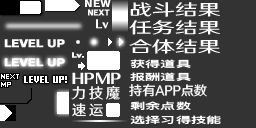
<style>
.page{position:relative;width:256px;height:128px;background:#333333}
.page>*{position:absolute;margin:0}
.t1{font:16px/18px "HYWenHei-FEW";letter-spacing:-0.015em;color:#ffffff;scale:1.45 1}
.t2{font:16px/18.7px "HYWenHei-FEW";letter-spacing:-0.015em;color:#ffffff;scale:1.45 1}
.t3{font:8.9px/12.7px "DFKingGothicSC14-Semibold";letter-spacing:0.005em;color:#ffffff;scale:1.71 1}
.t4{font:14.7px/16.7px "HYWenHei-FEW";letter-spacing:0.165em;color:#ffffff}
.t5{font:13.3px "HYWenHei-FEW";letter-spacing:-0.015em;color:#ffffff}
.t6{font:8.9px/13.3px "DFKingGothicSC14-Semibold";letter-spacing:0.005em;color:#ffffff;scale:1.71 1}
</style>
<div class="page">
<p class="t1" style="left:129px;top:2px;width:91px;height:52px">战斗结果<br><span class="t2">任务结果<br></span>合体结果</p>
<p class="t3" style="left:130px;top:59px;width:61px;height:22px">获得道具<br>报酬道具</p>
<p class="t4" style="left:72px;top:85px;width:48px;height:32px">力技魔<br>速运</p>
<p class="t5" style="left:129px;top:84px;width:78px;height:13px">持有APP点数</p>
<p class="t3" style="left:130px;top:101px;width:91px;height:24px"><span class="t6">剩余点数<br></span>选择习得技能</p>
</div>
